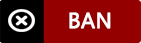
<style>
.page{position:relative;width:141px;height:43px;background:#940000}
.page>*{position:absolute;margin:0}
.t1{font:21.7px "SegoeUI";color:#ffffff;font-weight:bold}
</style>
<div class="page">
<p class="t1" style="left:69px;top:12px;width:42px;height:17px">BAN</p>
</div>
